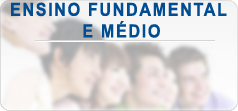
<style>
.page{position:relative;width:238px;height:111px}
.page>*{position:absolute;margin:0}
.t1{font:18px "Arial-BoldMT";letter-spacing:0.1em;color:#024d91;scale:0.9 1}
</style>
<div class="page">
<p class="t1" style="left:11px;top:2px;width:216px;height:36px;text-align:center">ENSINO FUNDAMENTAL <br>E MÉDIO</p>
</div>
